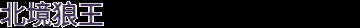
<style>
.page{position:relative;width:360px;height:28px;background:#000000}
.page>*{position:absolute;margin:0}
.t1{font:26px "WebPSD-18463539-0-Regular";color:#3f3254;font-weight:bold}
</style>
<div class="page">
<p class="t1" style="left:0px;top:0px;width:360px;height:28px">北境狼王</p>
</div>
